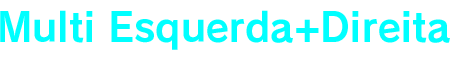
<style>
.page{position:relative;width:450px;height:60px;background:#ffffff}
.page>*{position:absolute;margin:0}
.t1{font:40px "RodinPro-B";color:#00ffff;scale:0.96 1}
</style>
<div class="page">
<p class="t1" style="left:0px;top:10px;width:450px;height:40px">Multi Esquerda+Direita</p>
</div>
